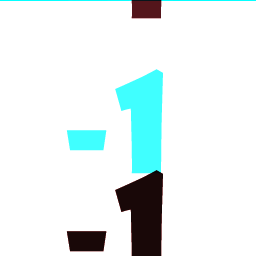
<style>
.page{position:relative;width:256px;height:256px;background:#ffffff}
.page>*{position:absolute;margin:0}
.t1{font:133px "ShowcardGothic-Reg";color:#40ffff}
</style>
<div class="page">
<p class="t1" style="left:66px;top:68px;width:97px;height:105px">-1</p>
</div>
